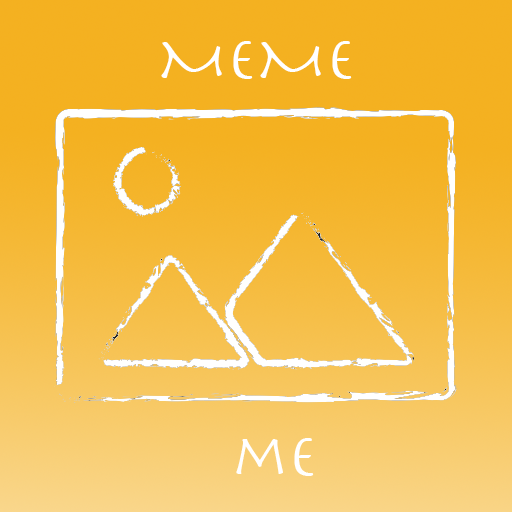
<style>
.page{position:relative;width:512px;height:512px}
.page>*{position:absolute;margin:0}
.t1{font:60px "Herculanum";color:#ffffff}
</style>
<div class="page">
<p class="t1" style="left:161px;top:41px;width:191px;height:38px">MEME</p>
<p class="t1" style="left:236px;top:438px;width:78px;height:38px">me</p>
</div>
